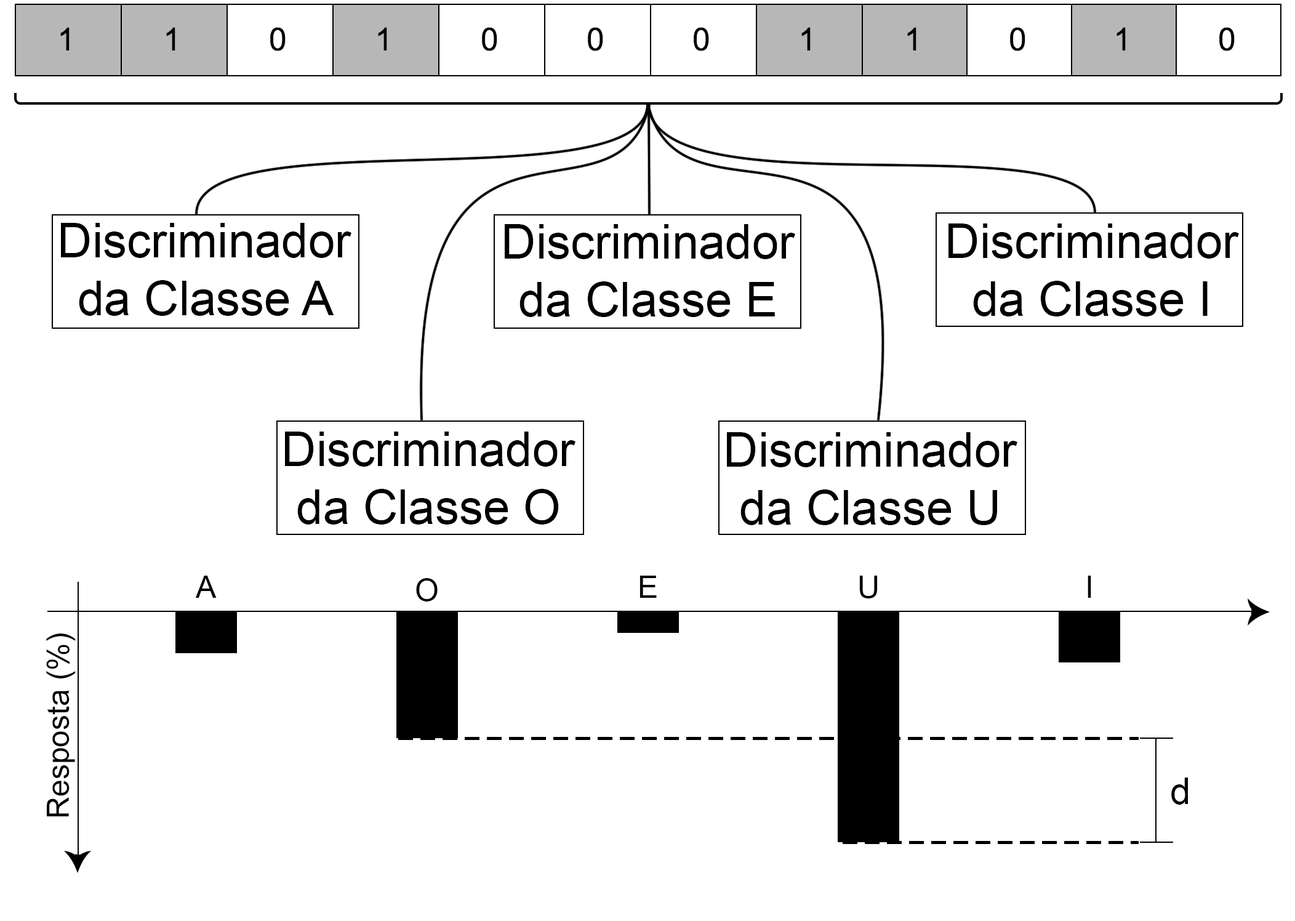
<style>
.page{position:relative;width:1295px;height:921px;background:#ffffff}
.page>*{position:absolute;margin:0}
.t1{font:48px "ArialMT";color:#000000}
.t2{font:30.8px "ArialMT";color:#000000}
.t3{font:36.9px "ArialMT";color:#000000}
</style>
<div class="page">
<p class="t1" style="left:61px;top:223px;width:290px;height:93px;text-align:center">Discriminador<br>da Classe A</p>
<p class="t1" style="left:505px;top:224px;width:290px;height:93px;text-align:center">Discriminador<br>da Classe E</p>
<p class="t1" style="left:948px;top:223px;width:291px;height:93px;text-align:center">Discriminador<br>da Classe I</p>
<p class="t1" style="left:285px;top:431px;width:290px;height:93px;text-align:center">Discriminador<br>da Classe O</p>
<p class="t1" style="left:727px;top:432px;width:290px;height:93px;text-align:center">Discriminador<br>da Classe U</p>
<p class="t2" style="left:196px;top:575px;width:21px;height:23px">A</p>
<p class="t2" style="left:416px;top:578px;width:22px;height:23px">O</p>
<p class="t2" style="left:640px;top:575px;width:17px;height:23px">E</p>
<p class="t2" style="left:859px;top:575px;width:19px;height:23px">U</p>
<p class="t2" style="left:1088px;top:575px;width:3px;height:23px">I</p>
<p class="t2" style="left:46px;top:633px;width:30px;height:183px;rotate:-90deg">Resposta (%)</p>
<p class="t3" style="left:1171px;top:777px;width:17px;height:27px">d</p>
</div>
